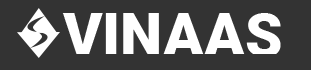
<style>
.page{position:relative;width:311px;height:70px;background:#333333}
.page>*{position:absolute;margin:0}
.t1{font:60px "Roboto-Black";color:#ffffff}
</style>
<div class="page">
<p class="t1" style="left:62px;top:13px;width:219px;height:44px">VINAAS</p>
</div>
